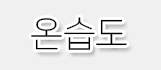
<style>
.page{position:relative;width:161px;height:70px;background:#f0f0f0}
.page>*{position:absolute;margin:0}
.t1{font:36px "NanumSquareL";color:#000000}
</style>
<div class="page">
<p class="t1" style="left:31px;top:17px;width:96px;height:33px">온습도</p>
</div>
